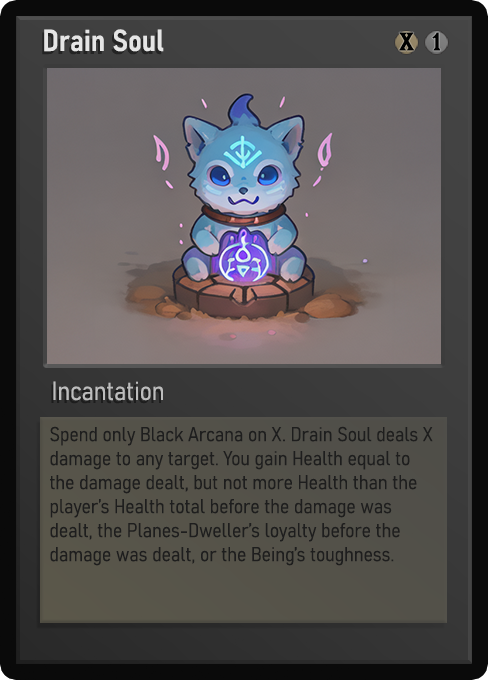
<style>
.page{position:relative;width:488px;height:680px}
.page>*{position:absolute;margin:0}
.t1{font:30px "Bahnschrift-SemiBoldSemiCondensed";color:#f2f2f2;font-weight:bold}
.t2{font:25px "WTRRoycroft";color:#000000;font-weight:bold;scale:1.09 1}
.t3{font:26px "Bahnschrift-LightSemiCondensed";color:#c8c8c8;font-weight:bold}
.t4{font:20px "Bahnschrift-LightSemiCondensed";color:#1e1e1e;font-weight:bold}
</style>
<div class="page">
<p class="t1" style="left:44px;top:29px;width:120px;height:23px;opacity:0.9">Drain Soul</p>
<p class="t2" style="left:399px;top:32px;width:15px;height:19px">X</p>
<p class="t2" style="left:432px;top:32px;width:9px;height:19px">1</p>
<p class="t3" style="left:53px;top:381px;width:110px;height:20px;opacity:0.9">Incantation</p>
<p class="t4" style="left:50px;top:426px;width:383px;height:140px">Spend only Black Arcana on X. Drain Soul deals X damage to any target. You gain Health equal to the damage dealt, but not more Health than the player’s Health total before the damage was dealt, the Planes-Dweller’s loyalty before the damage was dealt, or the Being’s toughness.</p>
</div>
